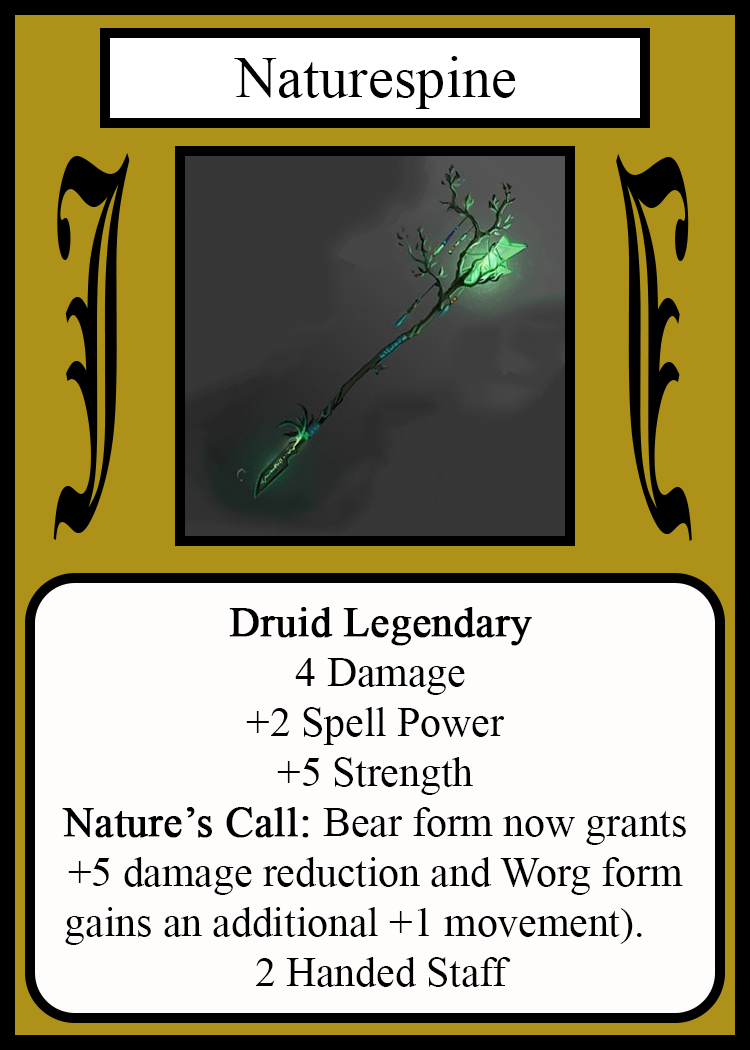
<style>
.page{position:relative;width:750px;height:1050px;background:#fffcfc}
.page>*{position:absolute;margin:0}
.t1{font:58.3px "TimesNewRomanPSMT";color:#010101}
.t2{font:450.1px "OldEnglishTextMT";color:#000000;scale:0.26 1}
.t3{font:449.7px "OldEnglishTextMT";color:#000000;scale:0.26 1}
.t4{font:41.7px "TimesNewRomanPSMT";color:#000000}
.t5{font:41.7px "TimesNewRomanPSMT";color:#000000;font-weight:bold}
</style>
<div class="page">
<p class="t1" style="left:234px;top:56px;width:282px;height:53px">Naturespine</p>
<p class="t2" style="left:53px;top:153px;width:77px;height:387px">J</p>
<p class="t3" style="left:616px;top:154px;width:76px;height:387px;rotate:180deg">J</p>
<p class="t4" style="left:62px;top:607px;width:624px;height:380px;text-align:center"><span class="t5">Druid Legendary<br></span> 4 Damage<br>+2 Spell Power<br>+5 Strength<br><span class="t5">Nature’s Call: </span>Bear form now grants<br>+5 damage reduction and Worg form<br> gains an additional +1 movement).     <br> 2 Handed Staff</p>
</div>
